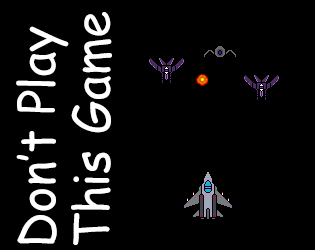
<style>
.page{position:relative;width:315px;height:250px;background:#000000}
.page>*{position:absolute;margin:0}
.t1{font:48.7px/54.8px "ComicSansMS";color:#ffffff}
</style>
<div class="page">
<p class="t1" style="left:16px;top:12px;width:96px;height:233px;rotate:-90deg">Don’t Play<br>This Game</p>
</div>
